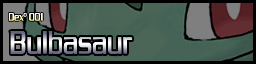
<style>
.page{position:relative;width:256px;height:64px}
.page>*{position:absolute;margin:0}
.t1{font:12px "ChaneyThinNormal"}
.t2{font:36px "ChaneyThinNormal"}
</style>
<div class="page">
<p class="t1" style="left:8px;top:13px;width:35px;height:8px">Dexº 001</p>
<p class="t2" style="left:10px;top:31px;width:123px;height:23px">Bulbasaur</p>
</div>
